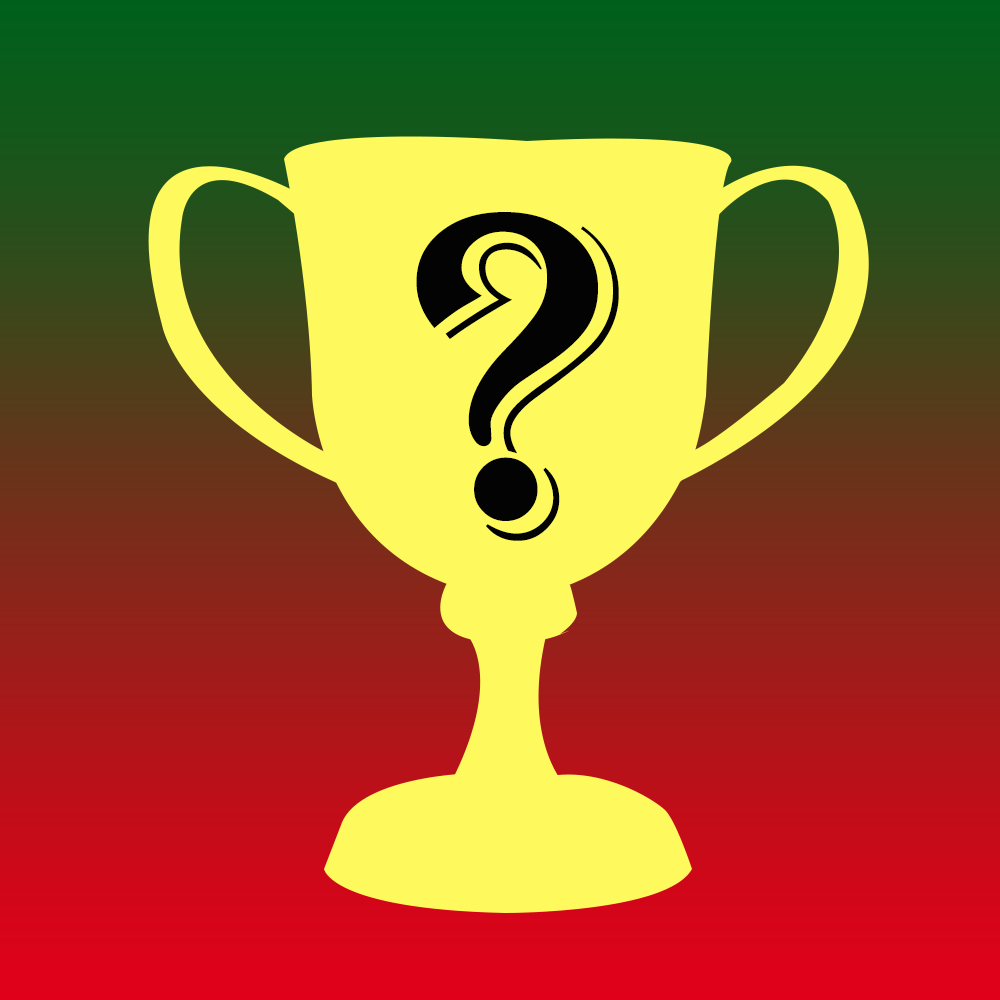
<style>
.page{position:relative;width:1000px;height:1000px;background:#fef95c}
.page>*{position:absolute;margin:0}
.t1{font:500px "Algerian";color:#030303}
</style>
<div class="page">
<p class="t1" style="left:416px;top:212px;width:203px;height:329px">?</p>
</div>
